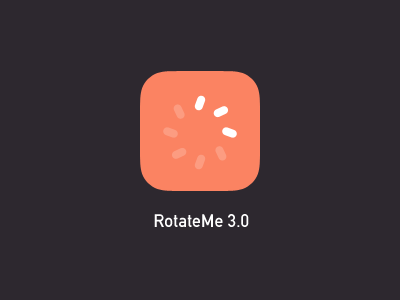
<style>
.page{position:relative;width:400px;height:300px;background:#2d282f}
.page>*{position:absolute;margin:0}
.t1{font:18px "DINAlternate-Bold";color:#ffffff}
</style>
<div class="page">
<p class="t1" style="left:154px;top:214px;width:95px;height:13px">RotateMe 3.0</p>
</div>
